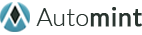
<style>
.page{position:relative;width:142px;height:35px;background:#ffffff}
.page>*{position:absolute;margin:0}
.t1{font:25px "Lato-Light";letter-spacing:0.01em;color:#29342f}
.t2{font:25px "Lato-Regular";letter-spacing:0.01em;color:#29342f;font-weight:bold}
</style>
<div class="page">
<p class="t1" style="left:36px;top:7px;width:106px;height:20px">Auto<span class="t2">mint</span></p>
</div>
